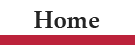
<style>
.page{position:relative;width:135px;height:45px;background:#ffffff}
.page>*{position:absolute;margin:0}
.t1{font:24px "PalatinoLinotype-Bold";color:#242424}
.t2{font:36px "PalatinoLinotype-Bold";color:#242424}
</style>
<div class="page">
<p class="t1" style="left:34px;top:11px;width:66px;height:17px;text-align:center">Home<br><span class="t2">Home</span></p>
</div>
